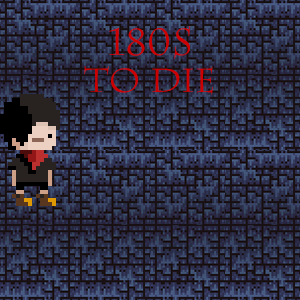
<style>
.page{position:relative;width:300px;height:300px}
.page>*{position:absolute;margin:0}
.t1{font:37.5px "Charlemagne";color:#cc0000}
.t2{font:33.3px "Charlemagne";color:#cc0000}
</style>
<div class="page">
<p class="t1" style="left:109px;top:26px;width:82px;height:33px">180S</p>
<p class="t2" style="left:84px;top:66px;width:129px;height:29px">TO DIE</p>
</div>
